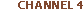
<style>
.page{position:relative;width:84px;height:9px;background:#ffffff}
.page>*{position:absolute;margin:0}
.t1{font:10.7px "Tahoma";letter-spacing:0.055em;color:#80482f;font-weight:bold}
</style>
<div class="page">
<p class="t1" style="left:18px;top:1px;width:55px;height:8px">CHANNEL</p>
<p class="t1" style="left:77px;top:1px;width:6px;height:8px">4</p>
</div>
